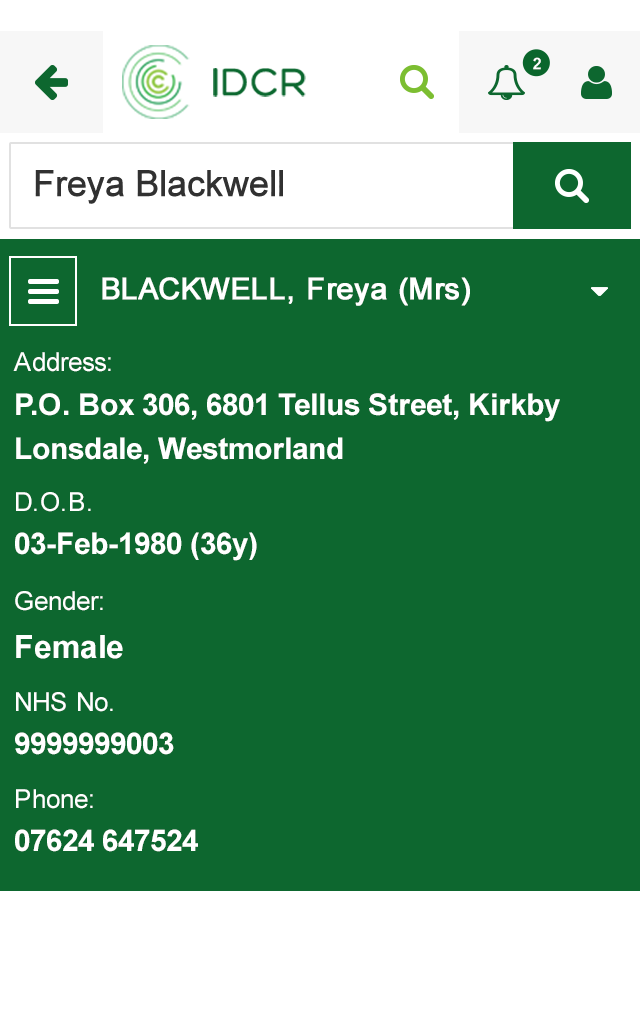
<style>
.page{position:relative;width:640px;height:1024px;background:#0d672f}
.page>*{position:absolute;margin:0}
.t1{font:30px/43.5px "Arial-BoldMT";color:#ffffff}
.t2{font:26px/43.5px "ArialMT";color:#ffffff}
.t3{font:26.1px/43.5px "ArialMT";color:#ffffff}
.t4{font:32px/47.5px "Arial-BoldMT";color:#ffffff}
</style>
<div class="page">
<p class="t1" style="left:13px;top:352px;width:547px;height:112px"><span class="t2">Address: <br></span>P.O. Box 306, 6801 Tellus Street, Kirkby Lonsdale, Westmorland</p>
<p class="t1" style="left:15px;top:492px;width:242px;height:69px"><span class="t3">D.O.B. <br></span>03-Feb-1980 (36y)</p>
<p class="t3" style="left:15px;top:591px;width:108px;height:68px">Gender: <br><span class="t4">Female</span></p>
<p class="t1" style="left:15px;top:692px;width:159px;height:63px"><span class="t3">NHS No. <br></span>9999999003</p>
<p class="t1" style="left:15px;top:789px;width:183px;height:63px"><span class="t2">Phone: <br></span>07624 647524</p>
</div>
